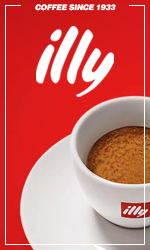
<style>
.page{position:relative;width:150px;height:250px}
.page>*{position:absolute;margin:0}
.t1{font:7.6px "Helvetica-BlackOblique";letter-spacing:-0.04em;color:#ffffff}
</style>
<div class="page">
<p class="t1" style="left:35px;top:4px;width:81px;height:7px">COFFEE SINCE 1933</p>
</div>
